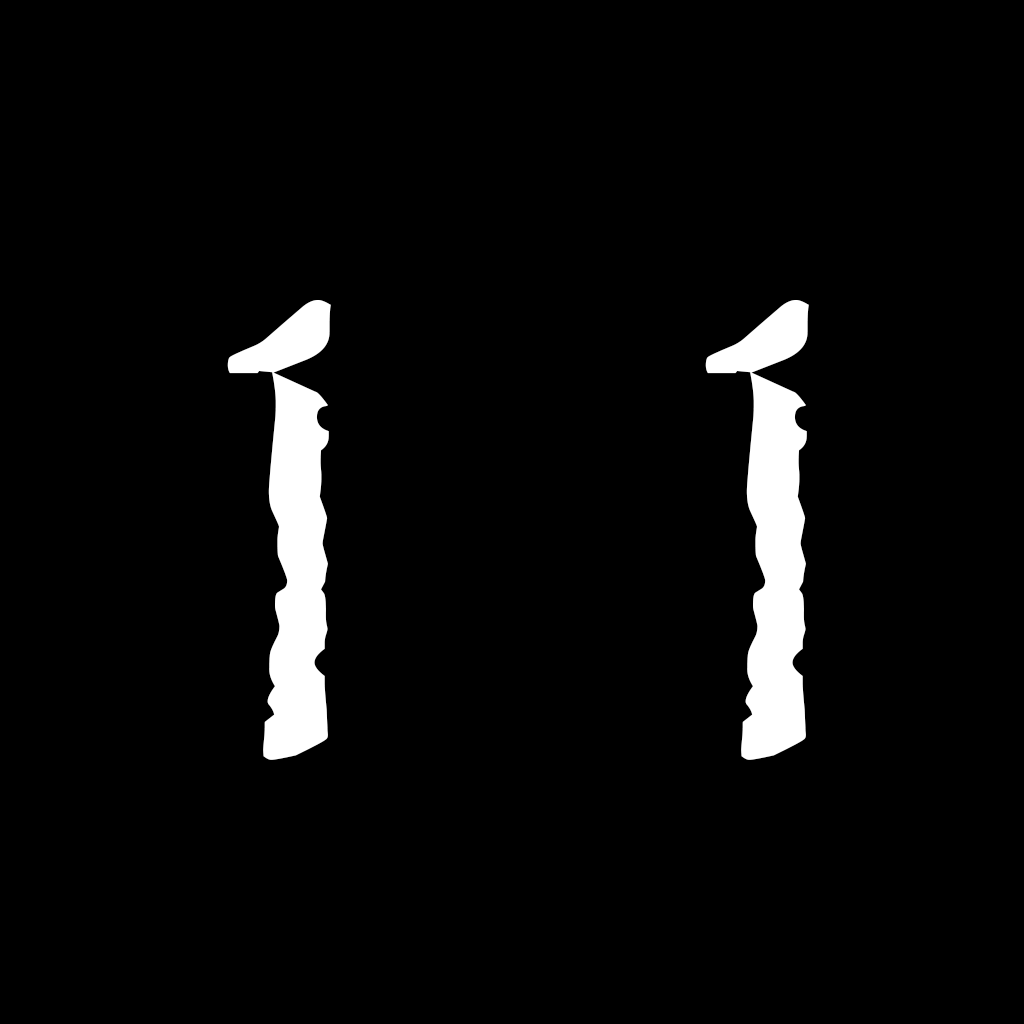
<style>
.page{position:relative;width:1024px;height:1024px;background:#000000}
.page>*{position:absolute;margin:0}
.t1{font:833.3px "Papyrus-Regular";color:#ffffff}
</style>
<div class="page">
<p class="t1" style="left:227px;top:300px;width:582px;height:460px">11</p>
</div>
